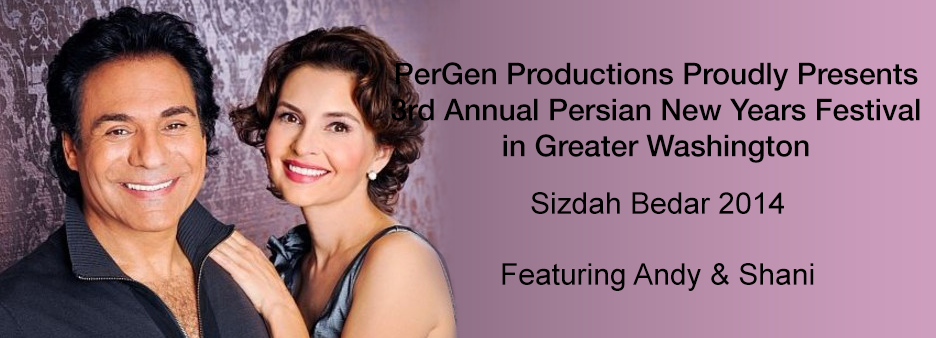
<style>
.page{position:relative;width:936px;height:338px}
.page>*{position:absolute;margin:0}
.t1{font:30px "HelveticaNeueLTStd-Md";color:#000000}
.t2{font:30px "ArialMT";color:#000000}
</style>
<div class="page">
<p class="t1" style="left:391px;top:62px;width:529px;height:101px;text-align:center">PerGen Productions Proudly Presents<br>3rd Annual Persian New Years Festival<br>in Greater Washington</p>
<p class="t2" style="left:531px;top:192px;width:253px;height:22px">Sizdah Bedar 2014</p>
<p class="t2" style="left:502px;top:263px;width:312px;height:28px">Featuring Andy &amp; Shani</p>
</div>
